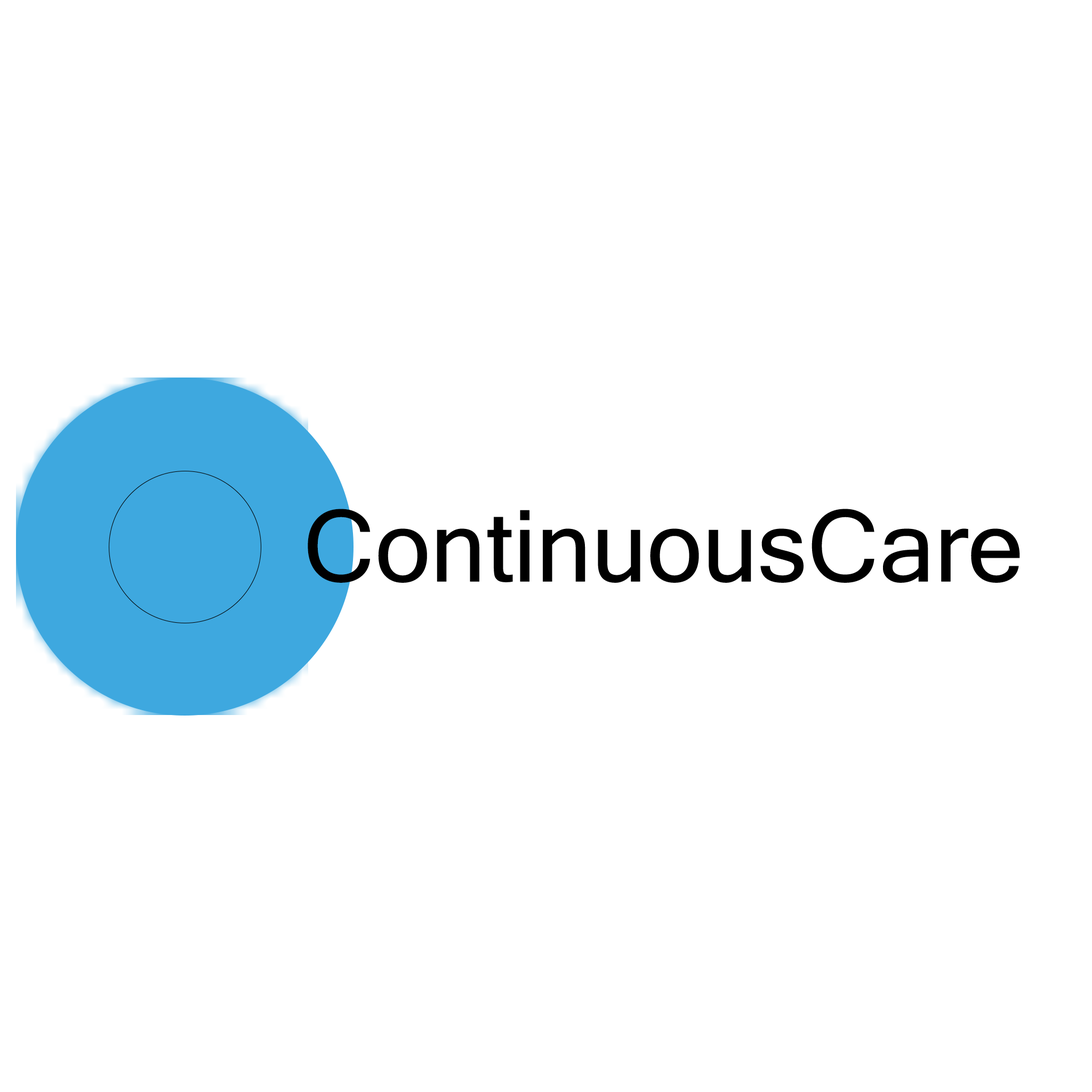
<style>
.page{position:relative;width:1092px;height:1092px;background:#ffffff}
.page>*{position:absolute;margin:0}
.t1{font:99.5px "MicrosoftSansSerif";color:#000000}
</style>
<div class="page">
<p class="t1" style="left:308px;top:509px;width:712px;height:74px">ContinuousCare</p>
</div>
